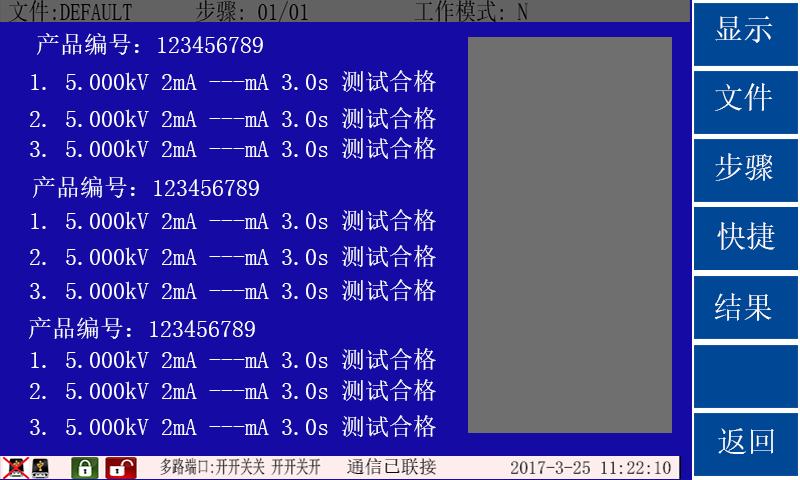
<style>
.page{position:relative;width:800px;height:480px;background:#150ba4}
.page>*{position:absolute;margin:0}
.t1{font:24px "SimSun";color:#ffffff}
</style>
<div class="page">
<p class="t1" style="left:37px;top:33px;width:226px;height:22px">产品编号：123456789</p>
<p class="t1" style="left:31px;top:70px;width:405px;height:22px">1. 5.000kV 2mA ---mA 3.0s 测试合格</p>
<p class="t1" style="left:30px;top:107px;width:406px;height:22px">2. 5.000kV 2mA ---mA 3.0s 测试合格</p>
<p class="t1" style="left:30px;top:137px;width:406px;height:22px">3. 5.000kV 2mA ---mA 3.0s 测试合格</p>
<p class="t1" style="left:33px;top:176px;width:226px;height:22px">产品编号：123456789</p>
<p class="t1" style="left:31px;top:209px;width:405px;height:22px">1. 5.000kV 2mA ---mA 3.0s 测试合格</p>
<p class="t1" style="left:30px;top:245px;width:406px;height:22px">2. 5.000kV 2mA ---mA 3.0s 测试合格</p>
<p class="t1" style="left:30px;top:279px;width:406px;height:22px">3. 5.000kV 2mA ---mA 3.0s 测试合格</p>
<p class="t1" style="left:29px;top:317px;width:226px;height:22px">产品编号：123456789</p>
<p class="t1" style="left:31px;top:348px;width:405px;height:22px">1. 5.000kV 2mA ---mA 3.0s 测试合格</p>
<p class="t1" style="left:30px;top:379px;width:406px;height:22px">2. 5.000kV 2mA ---mA 3.0s 测试合格</p>
<p class="t1" style="left:30px;top:415px;width:406px;height:22px">3. 5.000kV 2mA ---mA 3.0s 测试合格</p>
</div>
